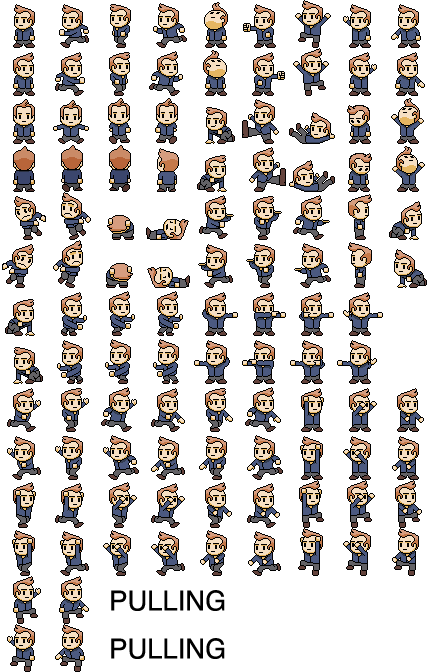
<style>
.page{position:relative;width:432px;height:672px;background:#ffffff}
.page>*{position:absolute;margin:0}
.t1{font:27.5px "Helvetica";color:#000000}
</style>
<div class="page">
<p class="t1" style="left:111px;top:590px;width:114px;height:21px">PULLING</p>
<p class="t1" style="left:111px;top:638px;width:114px;height:21px">PULLING</p>
</div>
